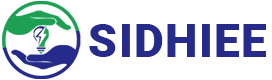
<style>
.page{position:relative;width:272px;height:80px;background:#ffffff}
.page>*{position:absolute;margin:0}
.t1{font:46.4px "Roboto-Black";letter-spacing:0.025em;color:#262a8a}
</style>
<div class="page">
<p class="t1" style="left:89px;top:24px;width:177px;height:33px">SIDHIEE</p>
</div>
